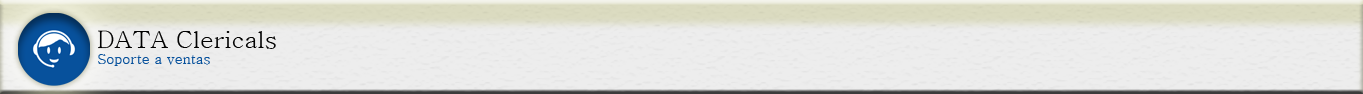
<style>
.page{position:relative;width:1363px;height:94px;background:#ededed}
.page>*{position:absolute;margin:0}
.t1{font:24px "Batang";color:#000000}
.t2{font:14px "Batang";color:#07519c}
</style>
<div class="page">
<p class="t1" style="left:98px;top:30px;width:178px;height:19px">DATA Clericals</p>
<p class="t2" style="left:98px;top:54px;width:112px;height:12px">Soporte a ventas</p>
</div>
